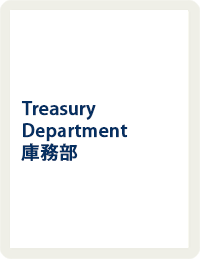
<style>
.page{position:relative;width:200px;height:259px;background:#ffffff}
.page>*{position:absolute;margin:0}
.t1{font:18px "KozGoPr6N-Medium";letter-spacing:0.005em;color:#052f61;font-weight:bold}
</style>
<div class="page">
<p class="t1" style="left:21px;top:101px;width:107px;height:60px">Treasury Department<br>庫務部</p>
</div>
